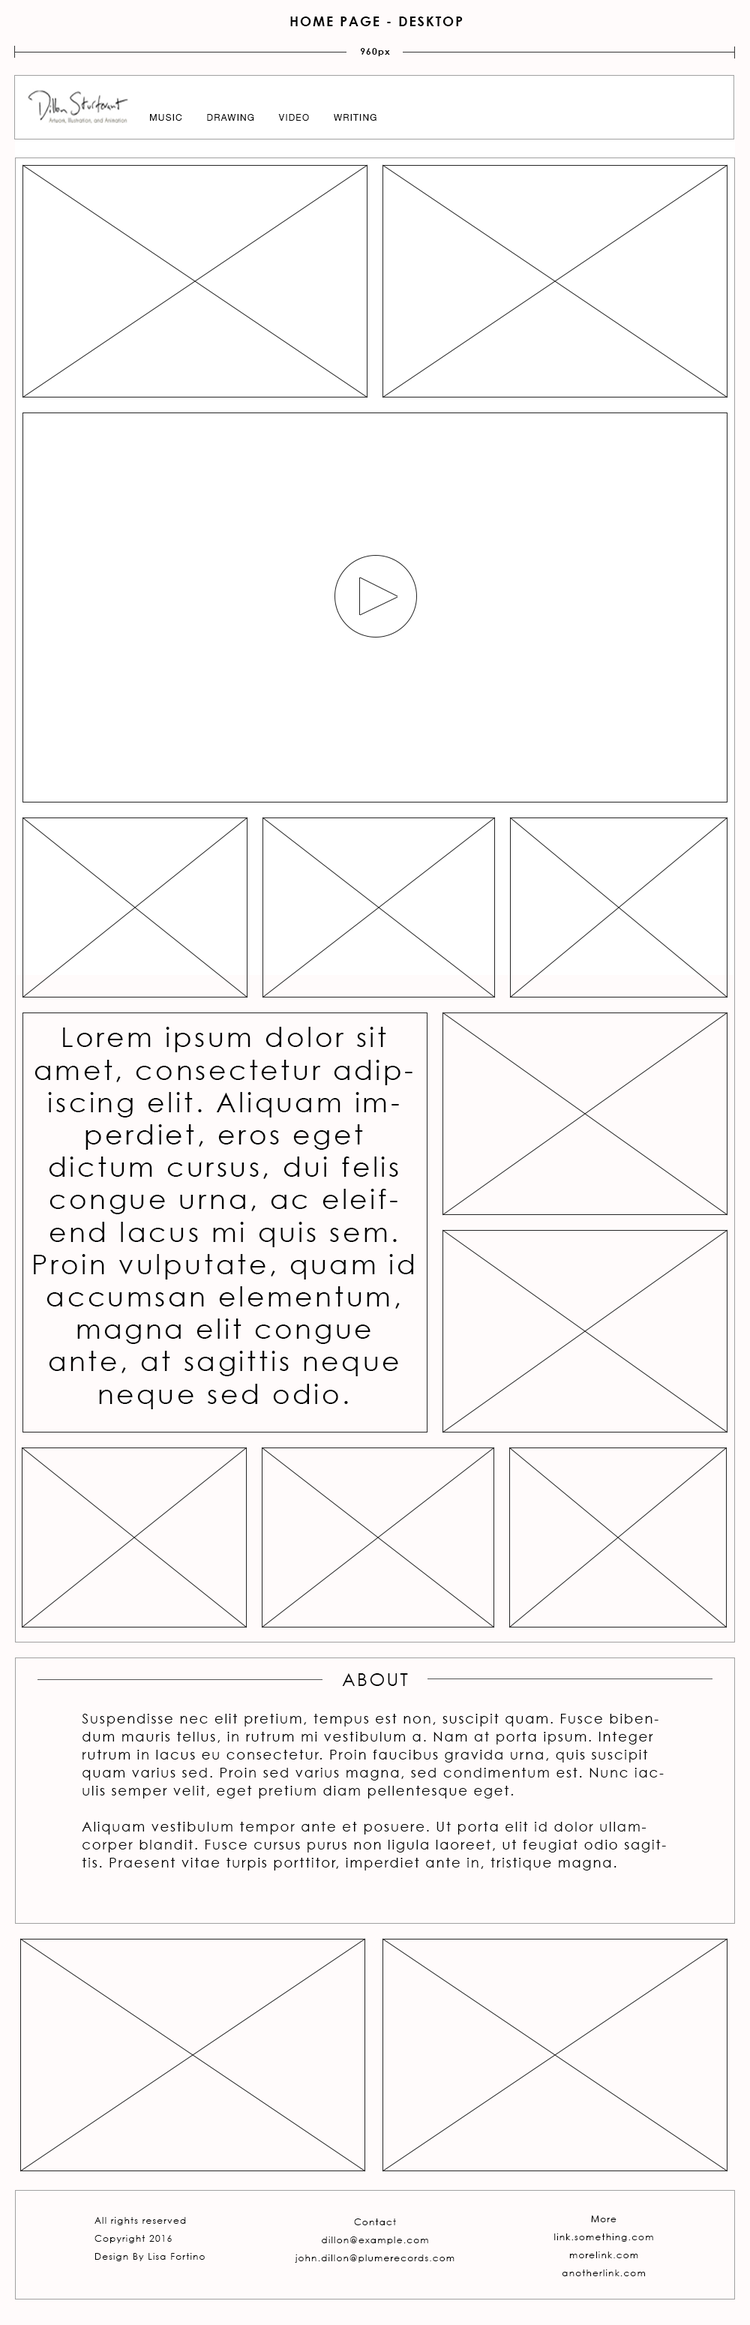
<style>
.page{position:relative;width:750px;height:2325px;background:#fffbfb}
.page>*{position:absolute;margin:0}
.t1{font:13.5px "CenturyGothic-Bold";letter-spacing:0.1em;color:#020202}
.t2{font:9px "CenturyGothic-Bold";letter-spacing:0.1em;color:#020202}
.t3{font:9px "HelveticaNeue";letter-spacing:0.1em;color:#020202}
.t4{font:27px "CenturyGothic";letter-spacing:0.1em;color:#020202}
.t5{font:18px "CenturyGothic";letter-spacing:0.1em;color:#020202}
.t6{font:13.5px/18px "CenturyGothic";letter-spacing:0.1em;color:#020202}
.t7{font:9px/18px "CenturyGothic";letter-spacing:0.1em;color:#020202}
</style>
<div class="page">
<p class="t1" style="left:290px;top:16px;width:173px;height:10px">HOME PAGE - DESKTOP</p>
<p class="t2" style="left:360px;top:48px;width:30px;height:8px">960px</p>
<p class="t3" style="left:150px;top:114px;width:226px;height:7px">MUSIC       DRAWING       VIDEO       WRITING</p>
<p class="t4" style="left:34px;top:1027px;width:379px;height:382px;text-align:center">Lorem ipsum dolor sit amet, consectetur adipiscing elit. Aliquam imperdiet, eros eget dictum cursus, dui felis congue urna, ac eleifend lacus mi quis sem. Proin vulputate, quam id accumsan elementum, magna elit congue ante, at sagittis neque neque sed odio.</p>
<p class="t5" style="left:342px;top:1673px;width:66px;height:13px">ABOUT</p>
<p class="t6" style="left:82px;top:1714px;width:584px;height:156px">Suspendisse nec elit pretium, tempus est non, suscipit quam. Fusce bibendum mauris tellus, in rutrum mi vestibulum a. Nam at porta ipsum. Integer rutrum in lacus eu consectetur. Proin faucibus gravida urna, quis suscipit quam varius sed. Proin sed varius magna, sed condimentum est. Nunc iaculis semper velit, eget pretium diam pellentesque eget.<br><br>Aliquam vestibulum tempor ante et posuere. Ut porta elit id dolor ullamcorper blandit. Fusce cursus purus non ligula laoreet, ut feugiat odio sagittis. Praesent vitae turpis porttitor, imperdiet ante in, tristique magna.</p>
<p class="t7" style="left:94px;top:2217px;width:111px;height:44px">All rights reserved<br>Copyright 2016<br>Design By Lisa Fortino</p>
<p class="t7" style="left:295px;top:2218px;width:159px;height:45px;text-align:center">Contact<br>dillon@example.com<br>john.dillon@plumerecords.com</p>
<p class="t7" style="left:554px;top:2216px;width:99px;height:60px;text-align:center">More<br>link.something.com<br>morelink.com<br>anotherlink.com</p>
</div>
